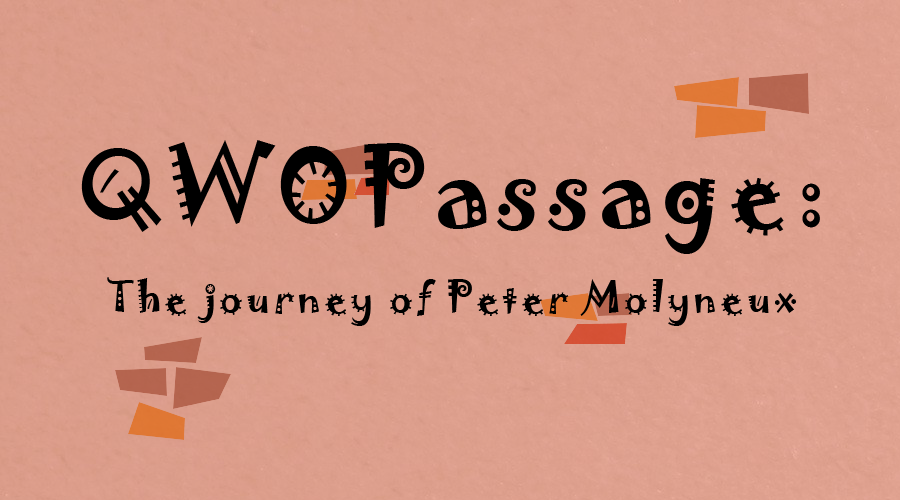
<style>
.page{position:relative;width:900px;height:500px}
.page>*{position:absolute;margin:0}
.t1{font:39px/87px "Jokerman-Regular";letter-spacing:0.08em;color:#000000}
.t2{font:98px/87px "Jokerman-Regular";letter-spacing:0.08em;color:#000000}
</style>
<div class="page">
<p class="t1" style="left:81px;top:140px;width:739px;height:186px;text-align:center"><span class="t2">QWOPassage:<br></span>The journey of Peter Molyneux</p>
</div>
